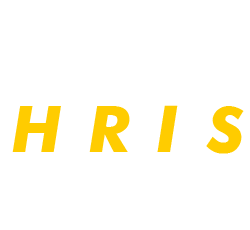
<style>
.page{position:relative;width:250px;height:230px;background:#ffffff}
.page>*{position:absolute;margin:0}
.t1{font:72px "Futura-Bold-Italic";color:#ffcc00}
</style>
<div class="page">
<p class="t1" style="left:12px;top:105px;width:232px;height:49px">H R I S</p>
</div>
